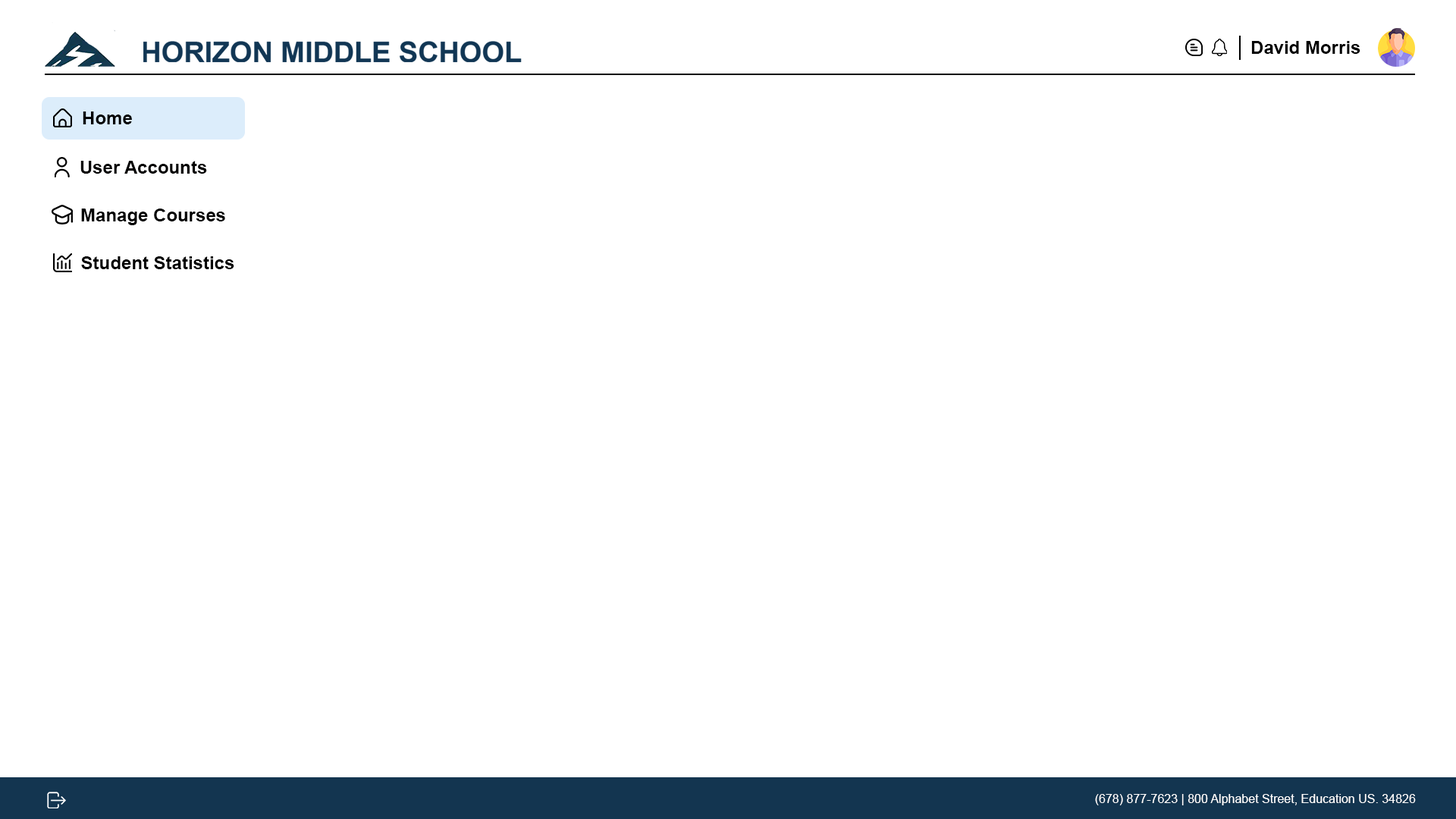
<style>
.page{position:relative;width:1456px;height:819px;background:#ffffff}
.page>*{position:absolute;margin:0}
.t1{font:18.2px "Arial-BoldMT";color:#000000}
.t2{font:18.2px "Arial-BoldMT";color:#010000}
.t3{font:12.1px "ArialMT";color:#ffffff}
</style>
<div class="page">
<p class="t1" style="left:1251px;top:41px;width:109px;height:13px">David Morris</p>
<p class="t1" style="left:83px;top:111px;width:49px;height:13px">Home</p>
<p class="t2" style="left:80px;top:161px;width:127px;height:13px">User Accounts</p>
<p class="t1" style="left:81px;top:209px;width:144px;height:16px">Manage Courses</p>
<p class="t1" style="left:81px;top:256px;width:153px;height:13px">Student Statistics</p>
<p class="t3" style="left:1095px;top:794px;width:321px;height:11px">(678) 877-7623 | 800 Alphabet Street, Education US. 34826</p>
</div>
